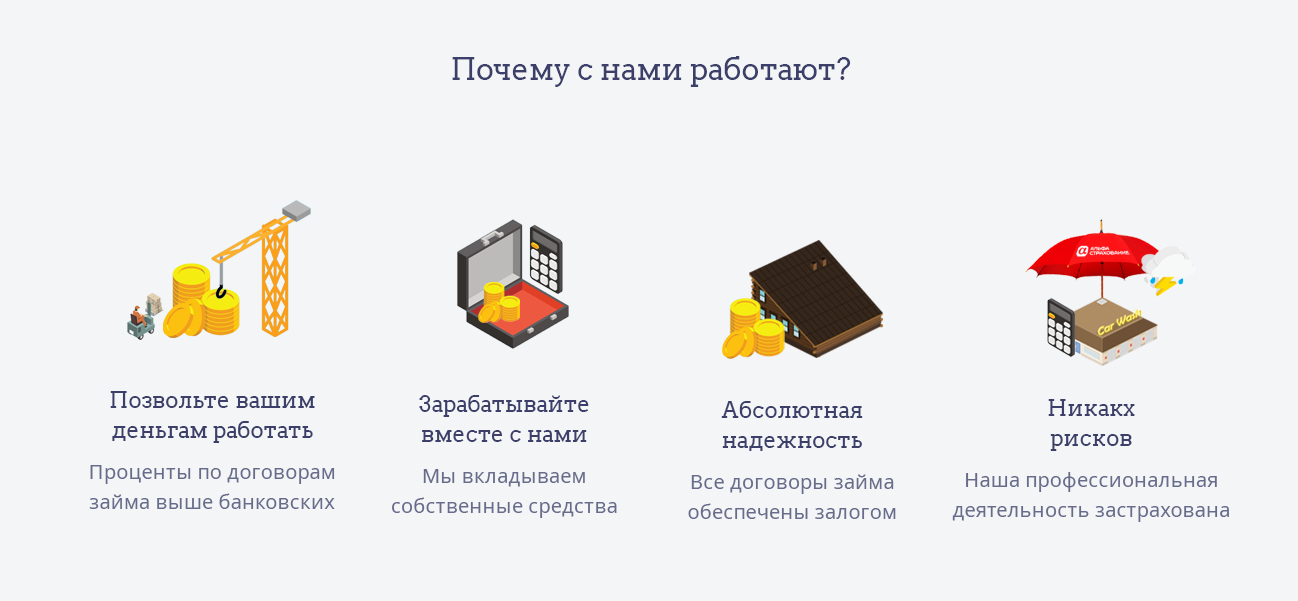
<style>
.page{position:relative;width:1298px;height:601px;background:#f3f5f7}
.page>*{position:absolute;margin:0}
.t1{font:30px "Arvo";letter-spacing:0.01em;color:#3b3f6a}
.t2{font:22px/30px "Arvo";letter-spacing:0.01em;color:#3b3f6a}
.t3{font:20px/30px "NotoSans";letter-spacing:0.01em;color:#686c8b}
</style>
<div class="page">
<p class="t1" style="left:452px;top:56px;width:399px;height:31px">Почему с нами работают?</p>
<p class="t2" style="left:110px;top:391px;width:205px;height:52px;text-align:center">Позвольте вашим <br>деньгам работать</p>
<p class="t2" style="left:419px;top:395px;width:170px;height:47px;text-align:center">Зарабатывайте<br>вместе с нами</p>
<p class="t2" style="left:721px;top:401px;width:142px;height:50px;text-align:center">Абсолютная <br>надежность</p>
<p class="t2" style="left:1048px;top:399px;width:87px;height:52px;text-align:center">Никакх <br>рисков</p>
<p class="t3" style="left:89px;top:465px;width:246px;height:44px;text-align:center">Проценты по договорам займа выше банковских</p>
<p class="t3" style="left:392px;top:469px;width:225px;height:49px;text-align:center">Мы вкладываем собственные средства</p>
<p class="t3" style="left:952px;top:472px;width:277px;height:50px;text-align:center">Наша профессиональная <br>деятельность застрахована</p>
<p class="t3" style="left:688px;top:474px;width:208px;height:45px;text-align:center">Все договоры займа<br>обеспечены залогом</p>
</div>
